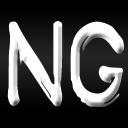
<style>
.page{position:relative;width:128px;height:128px}
.page>*{position:absolute;margin:0}
.t1{font:98.8px "EmbossingTape1(BRK)";scale:0.8 1}
</style>
<div class="page">
<p class="t1" style="left:7px;top:20px;width:117px;height:87px">NG</p>
</div>
